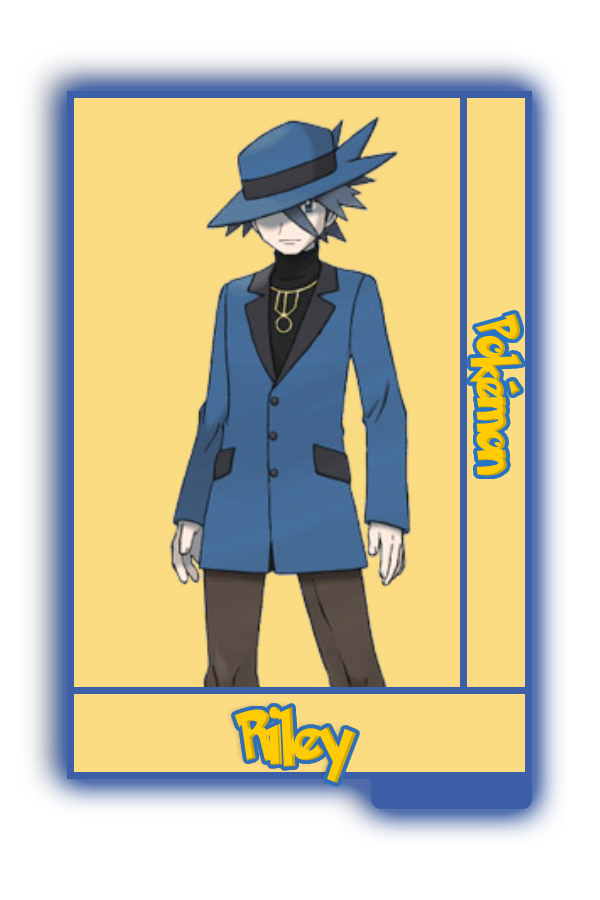
<style>
.page{position:relative;width:600px;height:900px;background:#fbdc83}
.page>*{position:absolute;margin:0}
.t1{font:48.8px "PokemonSolidNormal";color:#ffcb05;scale:0.8 1}
.t2{font:56.6px "PokemonSolidNormal";color:#ffcb05;scale:0.92 1}
</style>
<div class="page">
<p class="t1" style="left:469px;top:313px;width:54px;height:163px;rotate:90deg">Pokémon</p>
<p class="t2" style="left:234px;top:706px;width:123px;height:77px">Riley</p>
</div>
